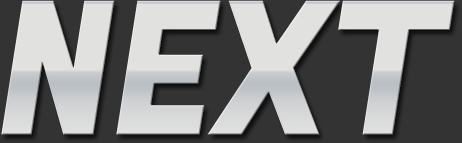
<style>
.page{position:relative;width:462px;height:143px;background:#333333}
.page>*{position:absolute;margin:0}
.t1{font:185.2px "FugazOne-Regular";color:#dfdfdf;scale:0.89 1}
</style>
<div class="page">
<p class="t1" style="left:1px;top:0px;width:454px;height:135px">NEXT</p>
</div>
